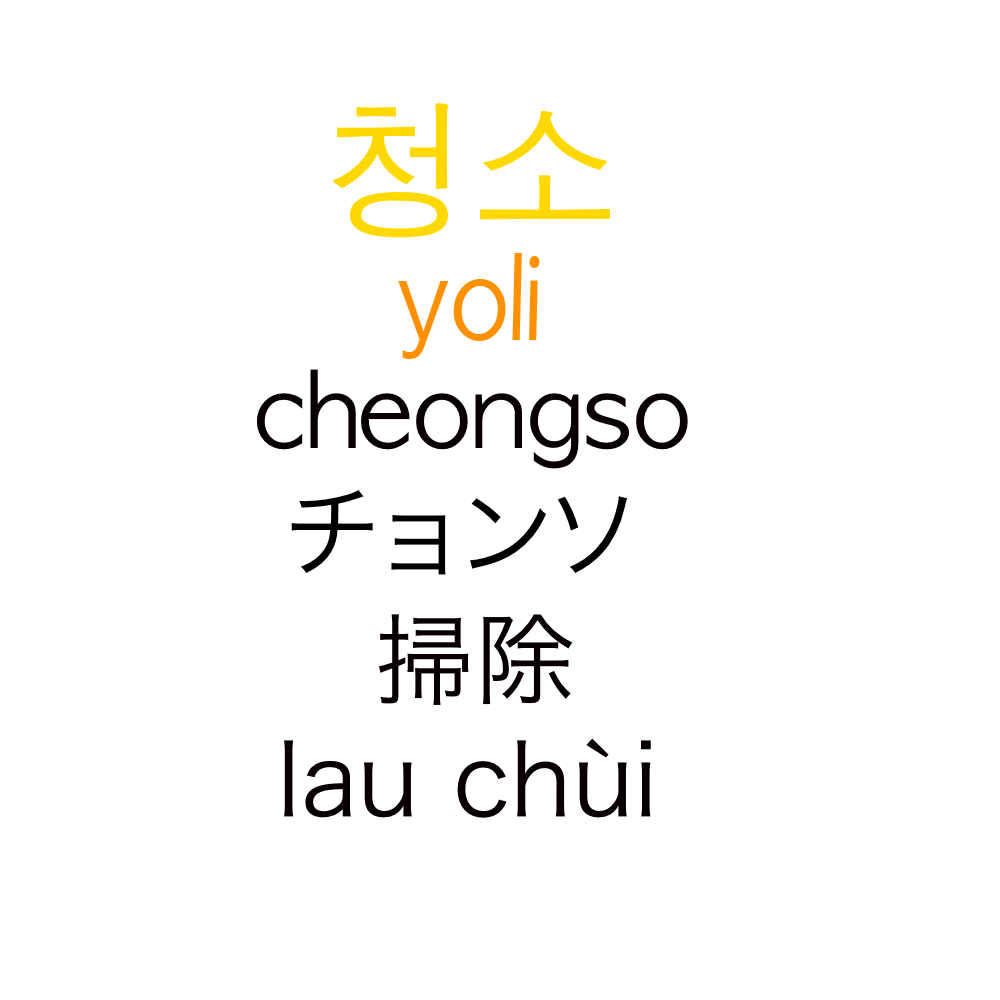
<style>
.page{position:relative;width:1000px;height:1000px;background:#ffffff}
.page>*{position:absolute;margin:0}
.t1{font:150px "AppleGothic";color:#ffd800}
.t2{font:111.2px "AppleGothic";color:#ff9000;scale:0.9 1}
.t3{font:100px "AppleGothic";color:#080000}
.t4{font:100px "HiraKakuProN-W3";color:#000000}
.t5{font:100px "HiraKakuProN-W3";color:#080000}
</style>
<div class="page">
<p class="t1" style="left:332px;top:103px;width:278px;height:135px">청소</p>
<p class="t2" style="left:398px;top:253px;width:142px;height:106px">yoli</p>
<p class="t3" style="left:256px;top:369px;width:432px;height:100px">cheongso</p>
<p class="t4" style="left:291px;top:490px;width:337px;height:85px">チョンソ</p>
<p class="t5" style="left:379px;top:614px;width:194px;height:91px">掃除</p>
<p class="t5" style="left:284px;top:738px;width:367px;height:80px">lau chùi</p>
</div>
